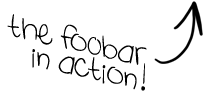
<style>
.page{position:relative;width:205px;height:98px;background:#ffffff}
.page>*{position:absolute;margin:0}
.t1{font:18px/24px "ShiningLikeStars";color:#000000;scale:0.96 1}
</style>
<div class="page">
<p class="t1" style="left:7px;top:14px;width:140px;height:77px;text-align:right;rotate:13deg">the foObar <br>in action!</p>
</div>
